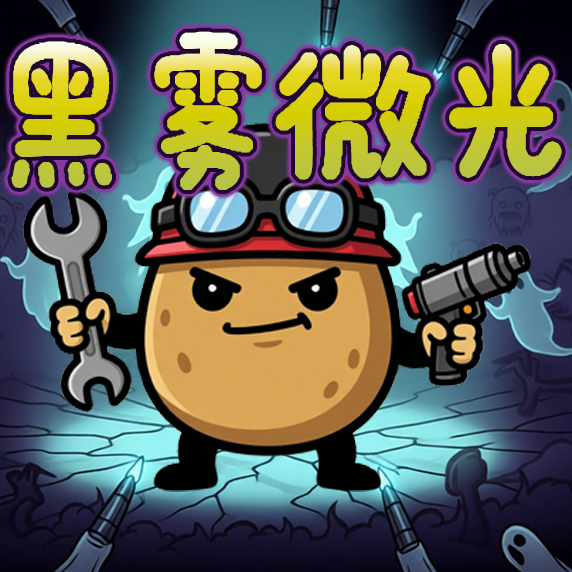
<style>
.page{position:relative;width:572px;height:572px}
.page>*{position:absolute;margin:0}
.t1{font:176.2px "RXXXKAT";letter-spacing:-0.1em;scale:0.93 1}
</style>
<div class="page">
<p class="t1" style="left:11px;top:31px;width:551px;height:159px">黑雾微光</p>
</div>
